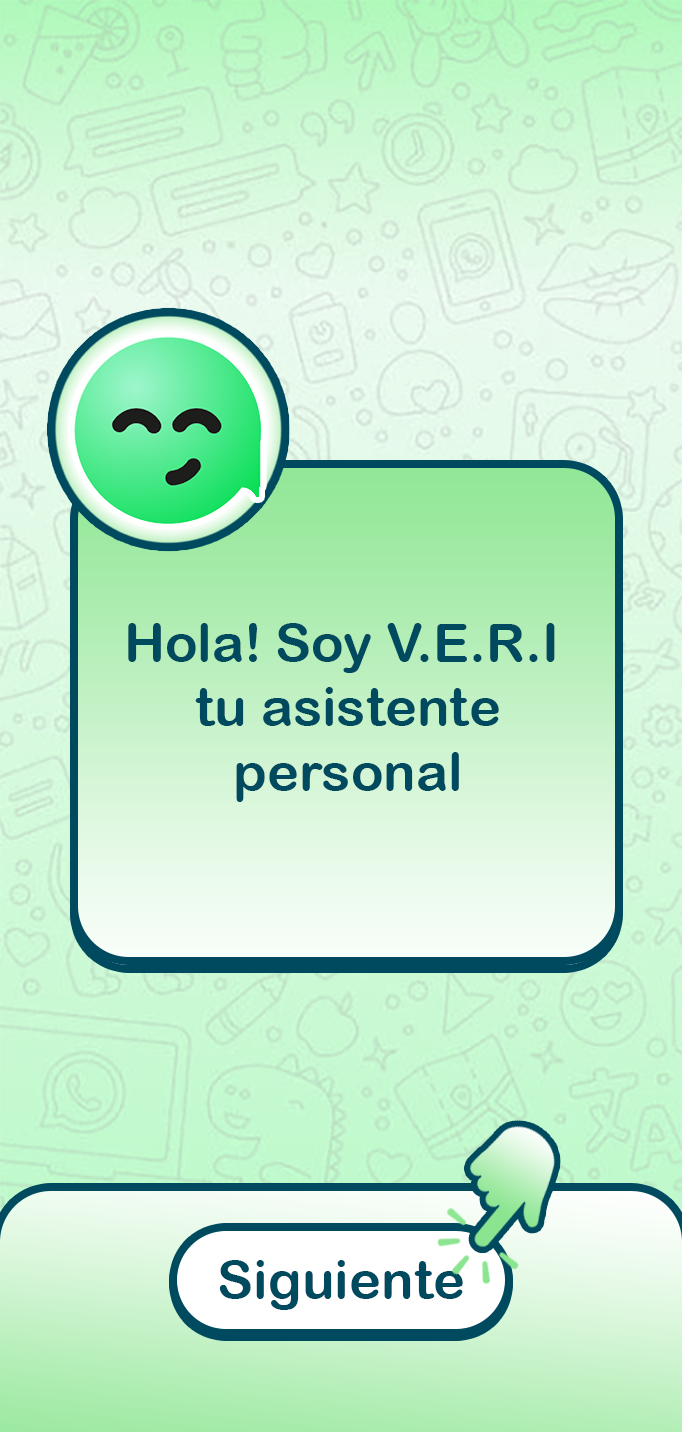
<style>
.page{position:relative;width:682px;height:1432px}
.page>*{position:absolute;margin:0}
.t1{font:54px "ArialRoundedMTBold";color:#004a5f}
</style>
<div class="page">
<p class="t1" style="left:128px;top:623px;width:427px;height:179px;text-align:center">Hola! Soy V.E.R.I <br>tu asistente<br>personal</p>
<p class="t1" style="left:219px;top:1260px;width:244px;height:50px">Siguiente</p>
</div>
